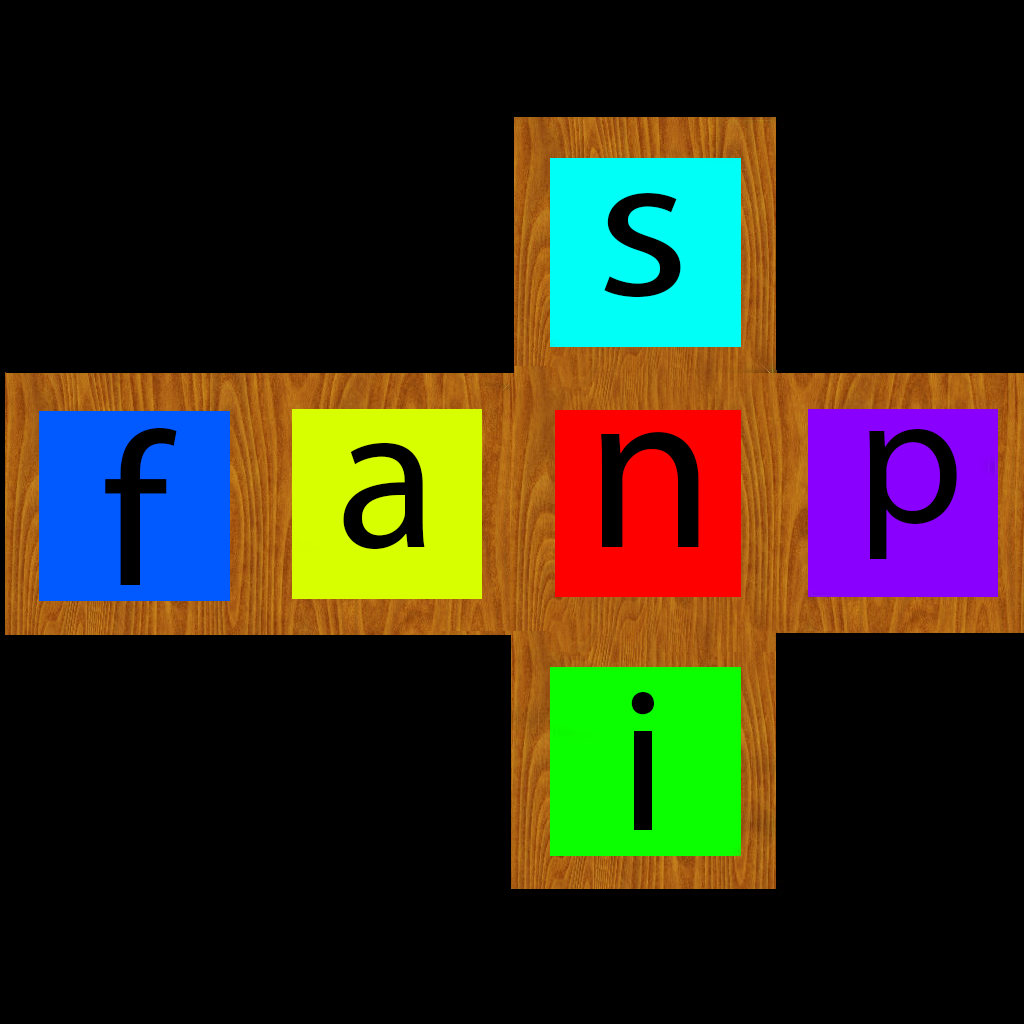
<style>
.page{position:relative;width:1024px;height:1024px;background:#000000}
.page>*{position:absolute;margin:0}
.t1{font:205.8px "MyriadPro-Regular";color:#000000;scale:1.17 1}
.t2{font:218.1px "MyriadPro-Regular";color:#000000;scale:1.03 1}
.t3{font:234px "MyriadPro-Regular";color:#000000}
.t4{font:189px "MyriadPro-Regular";color:#000000}
.t5{font:209.9px "MyriadPro-Regular";color:#000000}
.t6{font:204.2px "MyriadPro-Regular";color:#000000}
</style>
<div class="page">
<p class="t1" style="left:604px;top:193px;width:77px;height:105px">s</p>
<p class="t2" style="left:105px;top:428px;width:72px;height:157px">f</p>
<p class="t3" style="left:601px;top:432px;width:98px;height:115px">n</p>
<p class="t4" style="left:869px;top:429px;width:88px;height:130px">p</p>
<p class="t5" style="left:343px;top:442px;width:82px;height:108px">a</p>
<p class="t6" style="left:631px;top:692px;width:23px;height:138px">i</p>
</div>
